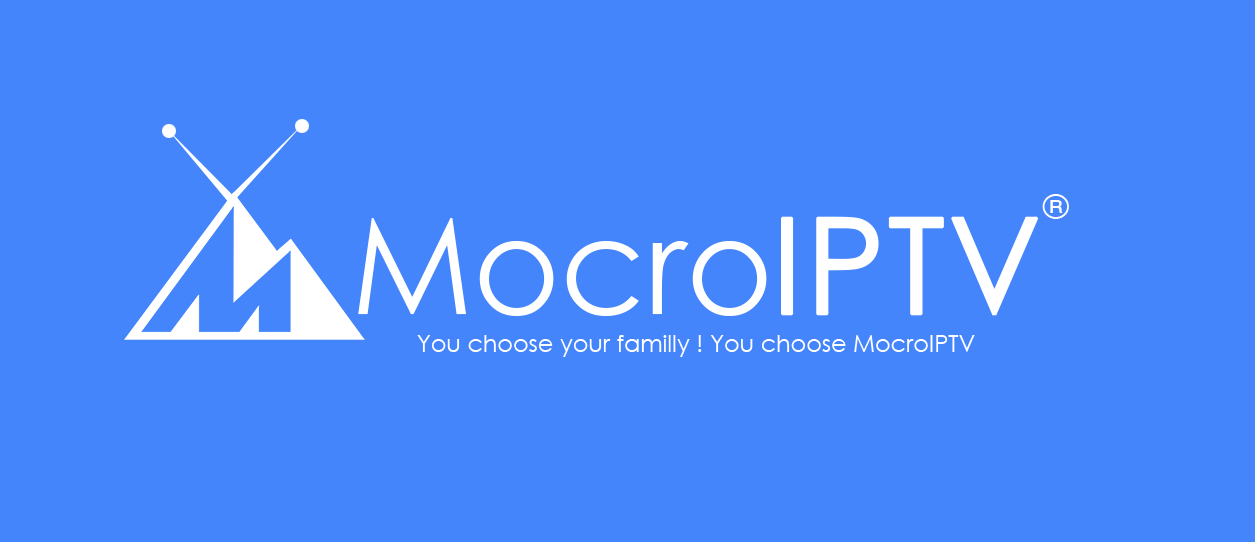
<style>
.page{position:relative;width:1255px;height:542px;background:#4485fc}
.page>*{position:absolute;margin:0}
.t1{font:34px "CenturyGothic";color:#ffffff}
.t2{font:132.7px "CenturyGothic";color:#ffffff}
.t3{font:132.7px "CenturyGothic";color:#ffffff;font-weight:bold}
.t4{font:23.8px "CenturyGothic";color:#ffffff}
</style>
<div class="page">
<p class="t1" style="left:1042px;top:194px;width:27px;height:25px">®</p>
<p class="t2" style="left:358px;top:216px;width:681px;height:100px">Mocro<span class="t3">IPTV</span></p>
<p class="t4" style="left:417px;top:335px;width:558px;height:22px">You choose your familly ! You choose MocroIPTV</p>
</div>
